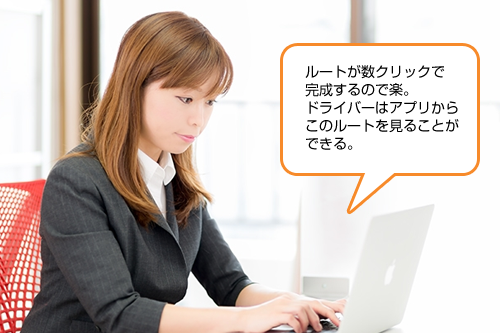
<style>
.page{position:relative;width:500px;height:333px}
.page>*{position:absolute;margin:0}
.t1{font:14px/18px "ShinGoPro-Regular";color:#000000}
.t2{font:14px/14px "ShinGoPro-Regular";color:#000000}
</style>
<div class="page">
<p class="t1" style="left:305px;top:65px;width:154px;height:85px"><span class="t2">ルートが</span>数クリックで<br>完成するので楽。<br>ドライバーはアプリから<br>このルートを見ることが<br>できる。</p>
</div>
